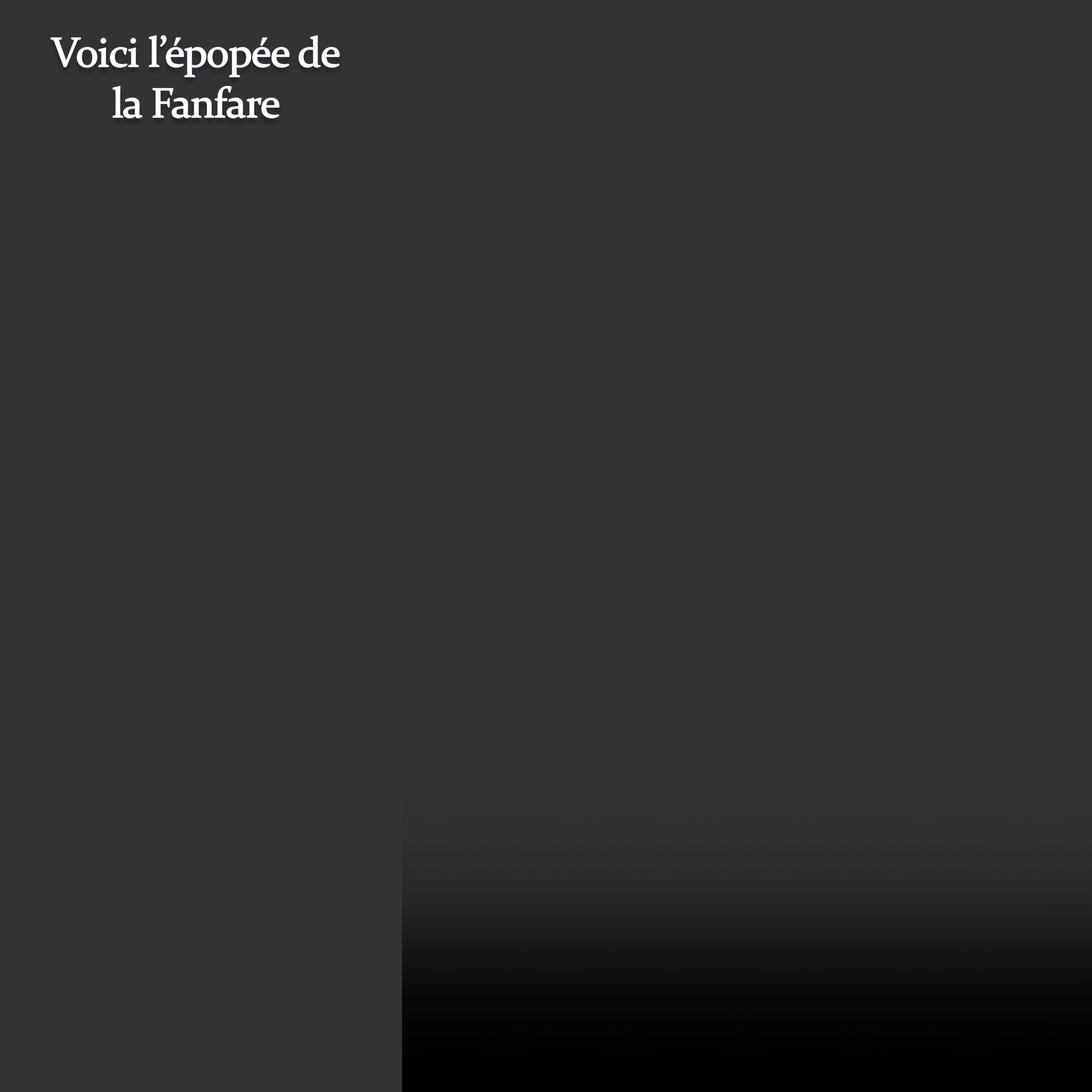
<style>
.page{position:relative;width:1092px;height:1092px;background:#333333}
.page>*{position:absolute;margin:0}
.t1{font:42.1px "Constantia";letter-spacing:-0.02em;color:#ffffff}
</style>
<div class="page">
<p class="t1" style="left:51px;top:36px;width:289px;height:82px;text-align:center">Voici l’épopée de<br>la Fanfare</p>
</div>
